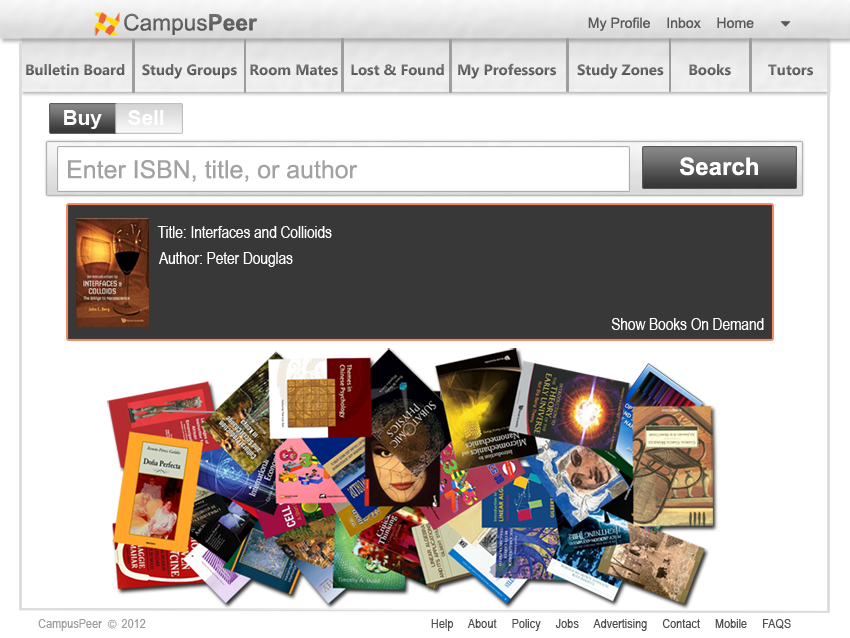
<style>
.page{position:relative;width:850px;height:638px;background:#ffffff}
.page>*{position:absolute;margin:0}
.t1{font:22.7px "ArialMT";color:#595858}
.t2{font:22.7px "Arial-BoldMT";color:#595858}
.t3{font:14.1px "ArialMT";color:#595959}
.t4{font:15px "MicrosoftTaiLe-Bold";color:#585959}
.t5{font:20.8px "Arial-BoldMT";color:#ffffff}
.t6{font:24.9px "ArialMT";color:#a3a2a2}
.t7{font:24.1px "Arial-BoldMT";color:#ffffff}
.t8{font:16.6px "ArialNarrow";color:#ffffff}
.t9{font:13.3px "ArialNarrow";color:#9b9b9b}
.t10{font:13.3px "ArialNarrow";color:#4e4e4e}
</style>
<div class="page">
<p class="t1" style="left:124px;top:13px;width:134px;height:22px">Campus<span class="t2">Peer</span></p>
<p class="t3" style="left:588px;top:17px;width:166px;height:14px">My Profile    Inbox    Home</p>
<p class="t4" style="left:26px;top:63px;width:787px;height:16px">Bulletin Board    Study Groups   Room Mates   Lost &amp; Found   My Professors     Study Zones      Books         Tutors</p>
<p class="t5" style="left:64px;top:110px;width:38px;height:19px">Buy</p>
<p class="t5" style="left:128px;top:110px;width:36px;height:15px">Sell</p>
<p class="t6" style="left:68px;top:160px;width:290px;height:22px">Enter ISBN, title, or author</p>
<p class="t7" style="left:680px;top:157px;width:78px;height:19px">Search</p>
<p class="t8" style="left:157px;top:226px;width:175px;height:12px">Title: Interfaces and Collioids</p>
<p class="t8" style="left:159px;top:252px;width:134px;height:15px">Author: Peter Douglas</p>
<p class="t8" style="left:611px;top:318px;width:153px;height:12px">Show Books On Demand</p>
<p class="t9" style="left:38px;top:619px;width:64px;height:12px">CampusPeer</p>
<p class="t9" style="left:121px;top:619px;width:25px;height:9px">2012</p>
<p class="t10" style="left:431px;top:619px;width:360px;height:12px">Help     About     Policy     Jobs     Advertising     Contact     Mobile     FAQS</p>
</div>
